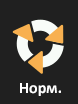
<style>
.page{position:relative;width:78px;height:104px;background:#202020}
.page>*{position:absolute;margin:0}
.t1{font:12px "Calibri-Bold";color:#ffffff}
</style>
<div class="page">
<p class="t1" style="left:20px;top:83px;width:41px;height:13px">Норм.</p>
</div>
